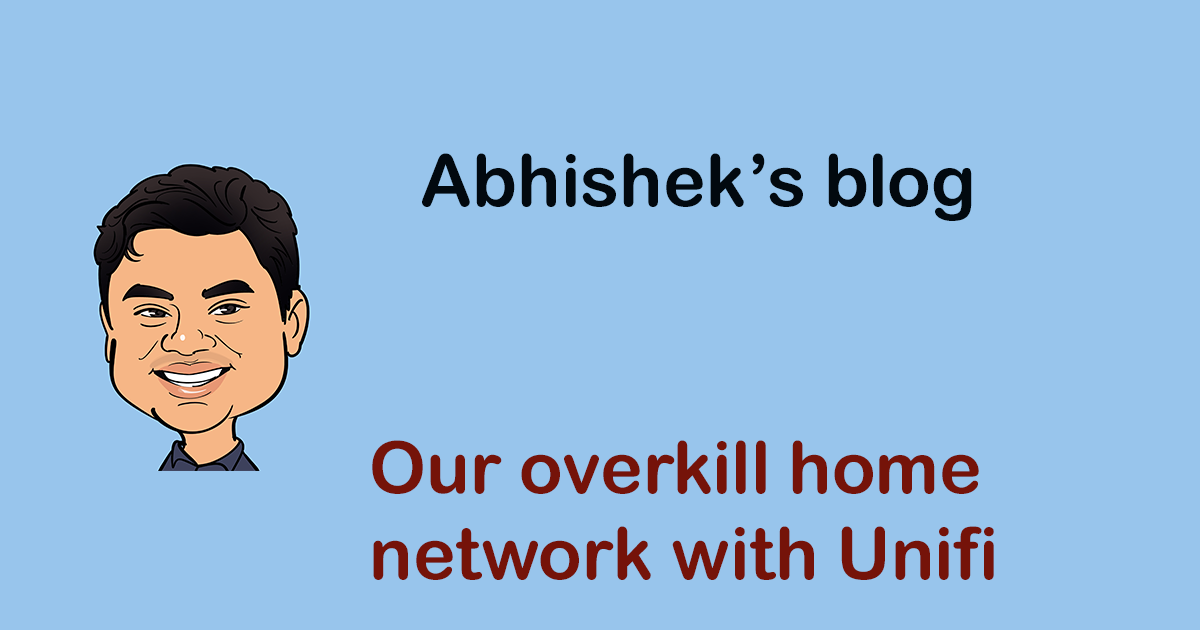
<style>
.page{position:relative;width:1200px;height:630px;background:#98c5ec}
.page>*{position:absolute;margin:0}
.t1{font:72px "ArialRoundedMTBold";color:#02090f}
.t2{font:72px "ArialRoundedMTBold";color:#751309}
</style>
<div class="page">
<p class="t1" style="left:422px;top:153px;width:550px;height:68px">Abhishek’s blog</p>
<p class="t2" style="left:372px;top:440px;width:622px;height:140px">Our overkill home <br>network with Unifi</p>
</div>
